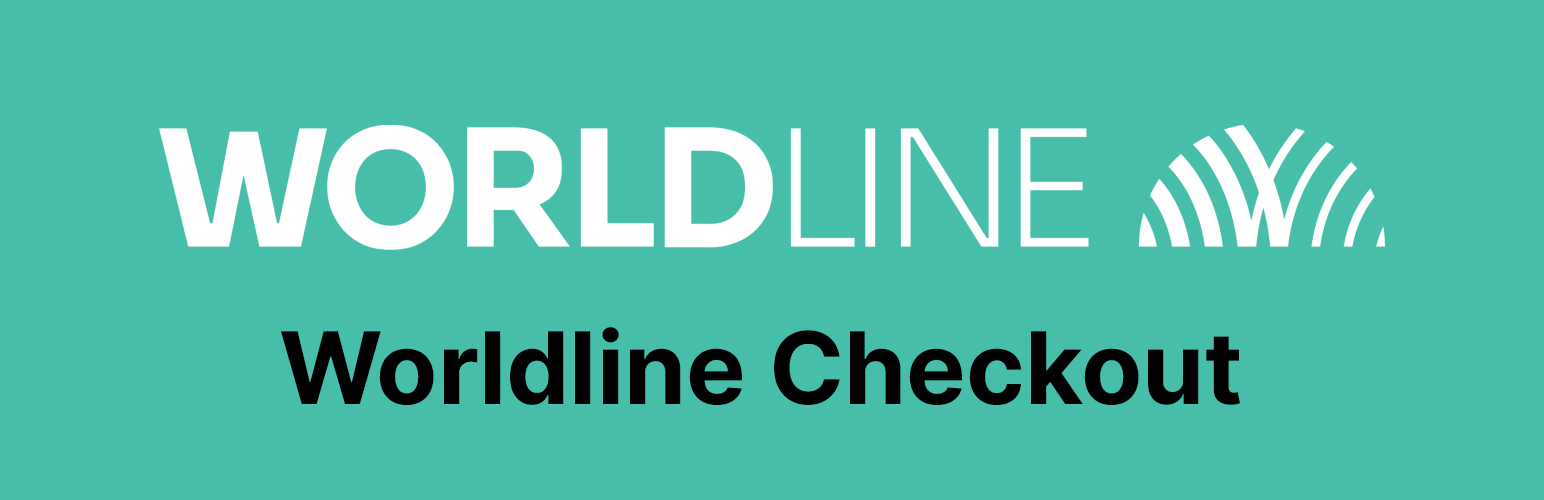
<style>
.page{position:relative;width:1544px;height:500px;background:#46beaa}
.page>*{position:absolute;margin:0}
.t1{font:100px "Inter-Bold";color:#000000}
</style>
<div class="page">
<p class="t1" style="left:281px;top:327px;width:959px;height:78px">Worldline Checkout</p>
</div>
